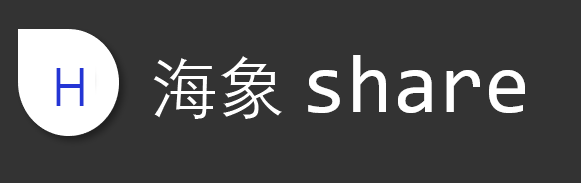
<style>
.page{position:relative;width:581px;height:183px;background:#333333}
.page>*{position:absolute;margin:0}
.t1{font:66.8px "STHeitiSC-Light";color:#ffffff}
.t2{font:52.8px "STHeitiSC-Light";color:#2435d5}
</style>
<div class="page">
<p class="t1" style="left:153px;top:56px;width:129px;height:63px">海象</p>
<p class="t2" style="left:56px;top:68px;width:28px;height:38px">H</p>
</div>
